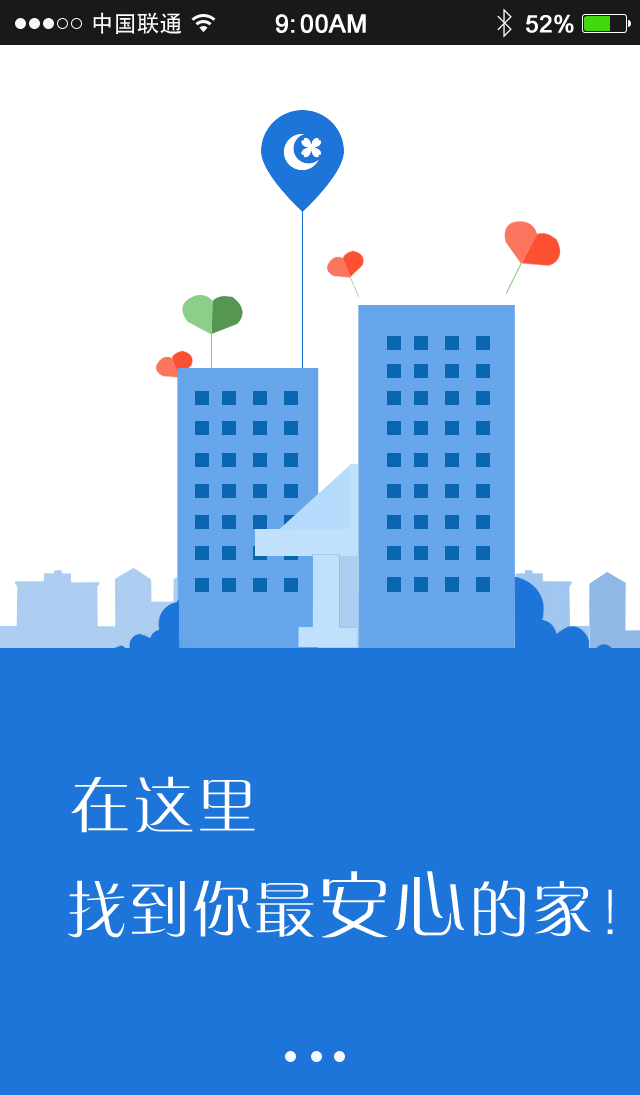
<style>
.page{position:relative;width:640px;height:1095px;background:#1d75d9}
.page>*{position:absolute;margin:0}
.t1{font:23px "AdobeHeitiStd-Regular";color:#ffffff}
.t2{font:25px "ArialMT";color:#ffffff;font-weight:bold}
.t3{font:24px "ArialMT";color:#ffffff;font-weight:bold}
.t4{font:60px "FZZQJW--GB1-0";letter-spacing:0.05em;color:#ffffff}
.t5{font:60px "FZZQJW--GB1-0";letter-spacing:0.1em;color:#ffffff}
.t6{font:72px "FZZQJW--GB1-0";letter-spacing:0.05em;color:#ffffff}
</style>
<div class="page">
<p class="t1" style="left:93px;top:12px;width:88px;height:22px">中国联通</p>
<p class="t2" style="left:275px;top:14px;width:91px;height:19px">9:00AM</p>
<p class="t3" style="left:526px;top:14px;width:48px;height:19px">52%</p>
<p class="t4" style="left:71px;top:776px;width:184px;height:57px">在这里</p>
<p class="t4" style="left:67px;top:871px;width:546px;height:67px"><span class="t5">    </span>找到你最<span class="t6">安心</span>的家！</p>
</div>
